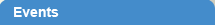
<style>
.page{position:relative;width:215px;height:25px;background:#448ccb}
.page>*{position:absolute;margin:0}
.t1{font:14px "Arial-BoldMT";color:#ffffff}
</style>
<div class="page">
<p class="t1" style="left:14px;top:7px;width:45px;height:10px">Events</p>
</div>
